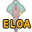
<style>
.page{position:relative;width:32px;height:32px;background:#ffffff}
.page>*{position:absolute;margin:0}
.t1{font:11px "Consolas";letter-spacing:0.1em;color:#f9b421;font-weight:bold}
</style>
<div class="page">
<p class="t1" style="left:3px;top:20px;width:28px;height:8px">ELOA</p>
</div>
